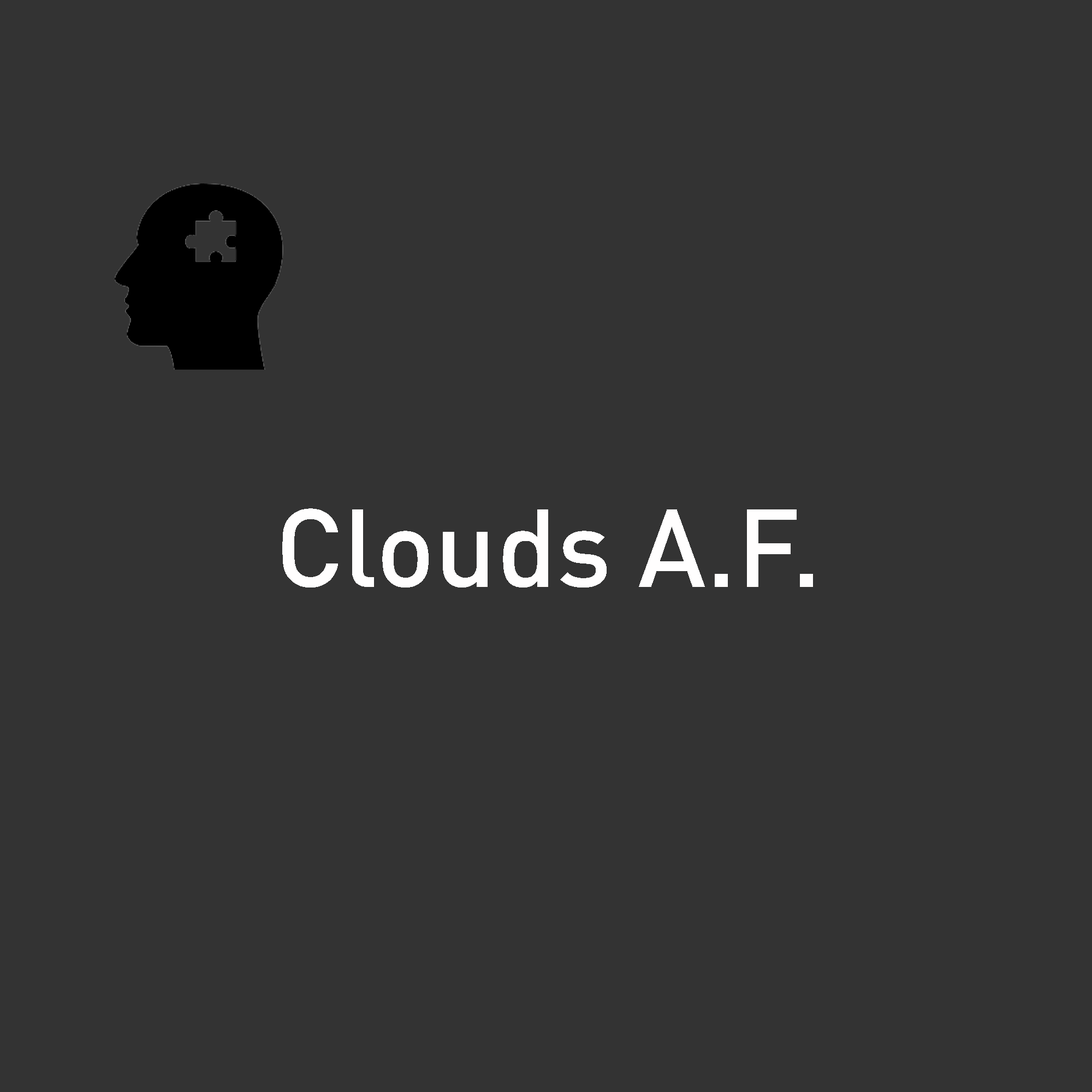
<style>
.page{position:relative;width:1092px;height:1092px;background:#333333}
.page>*{position:absolute;margin:0}
.t1{font:109.2px "DINOT-Medium";color:#fffefe}
</style>
<div class="page">
<p class="t1" style="left:282px;top:508px;width:531px;height:79px">Clouds A.F.</p>
</div>
